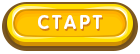
<style>
.page{position:relative;width:140px;height:54px;background:#ffffff}
.page>*{position:absolute;margin:0}
.t1{font:19px "RotondaC-Bold";letter-spacing:0.16em;color:#ffffff;text-transform:uppercase}
</style>
<div class="page">
<p class="t1" style="left:38px;top:15px;width:64px;height:14px">Старт</p>
</div>
